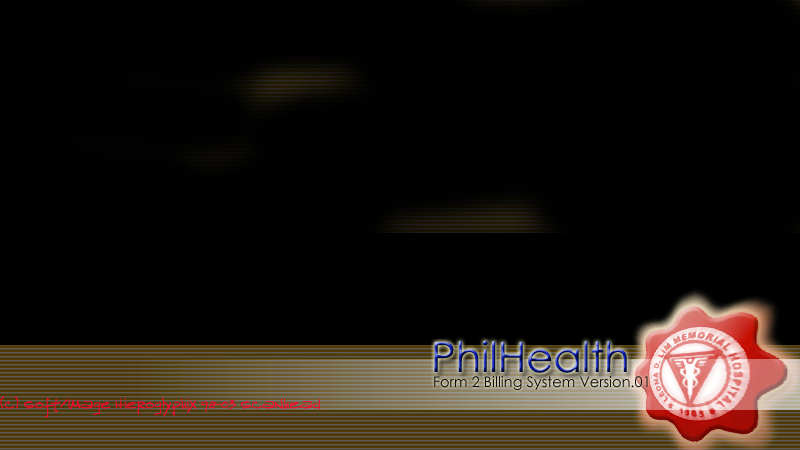
<style>
.page{position:relative;width:800px;height:450px;background:#000000}
.page>*{position:absolute;margin:0}
.t1{font:41.7px "CenturyGothic"}
.t2{font:25px "CenturyGothic";color:#0a0a0a}
.t3{font:25px "Reprobate";color:#fb062e}
</style>
<div class="page">
<p class="t1" style="left:434px;top:340px;width:193px;height:33px">PhilHealth</p>
<p class="t2" style="left:434px;top:376px;width:214px;height:14px">Form 2 Billing System Version.01</p>
<p class="t3" style="left:0px;top:396px;width:321px;height:22px">(c) Soft/Image Hieroglyphix 98-03 Scanhead</p>
</div>
